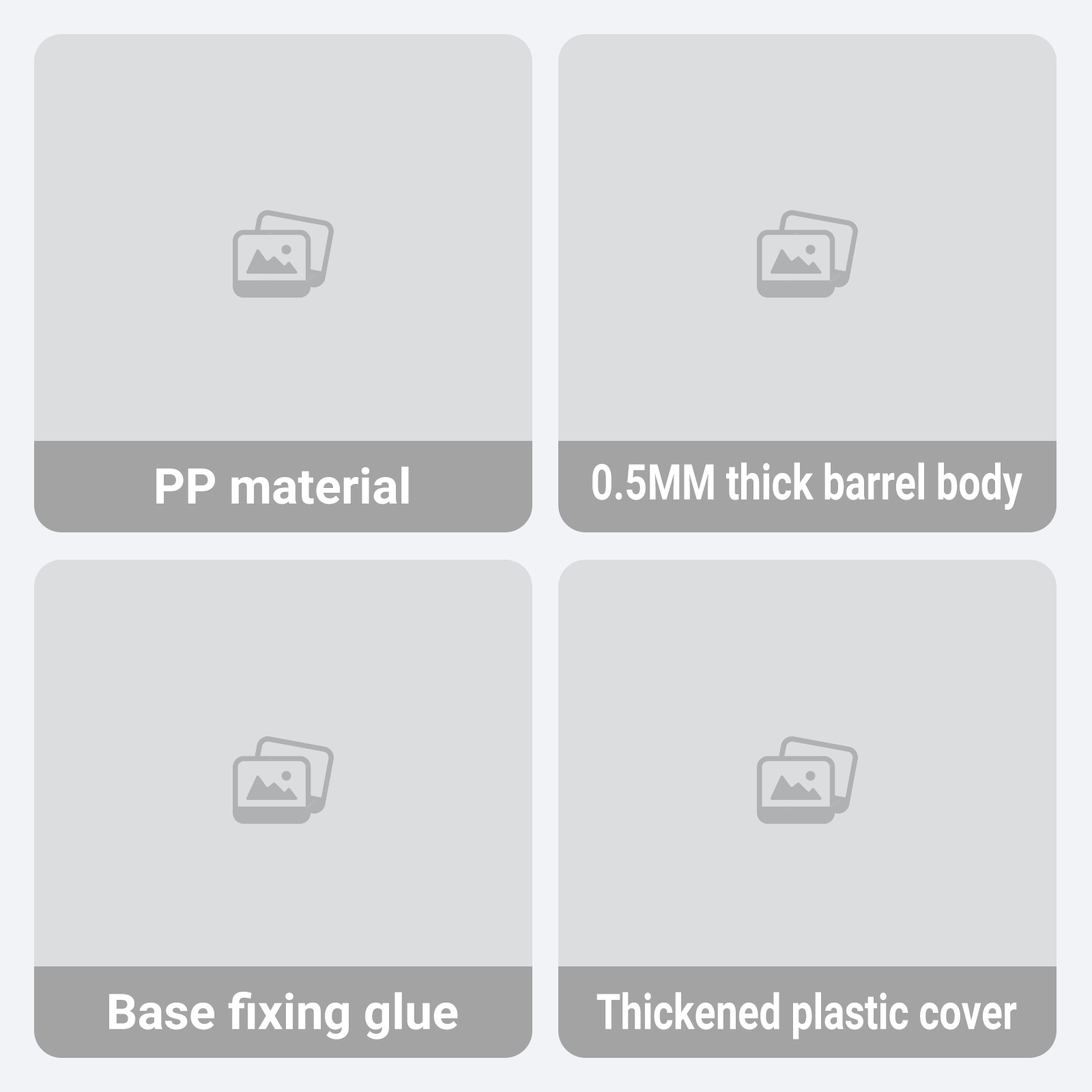
<style>
.page{position:relative;width:1092px;height:1092px;background:#dcdddf}
.page>*{position:absolute;margin:0}
.t1{font:49.1px "Roboto-Bold";color:#ffffff}
.t2{font:49.1px "Roboto-Bold";color:#ffffff;scale:0.8 1}
</style>
<div class="page">
<p class="t1" style="left:156px;top:466px;width:253px;height:38px">PP material</p>
<p class="t2" style="left:592px;top:462px;width:430px;height:48px">0.5MM thick barrel body</p>
<p class="t1" style="left:109px;top:992px;width:349px;height:47px">Base fixing glue</p>
<p class="t2" style="left:596px;top:992px;width:421px;height:47px">Thickened plastic cover</p>
</div>
